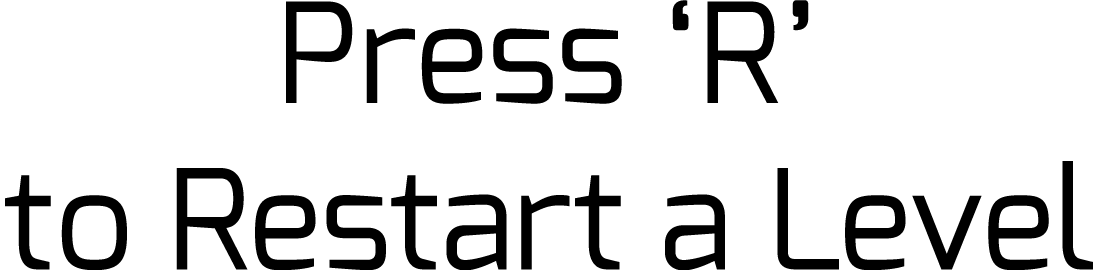
<style>
.page{position:relative;width:1093px;height:270px;background:#ffffff}
.page>*{position:absolute;margin:0}
.t1{font:138.7px "Exo-Regular";color:#000000}
</style>
<div class="page">
<p class="t1" style="left:5px;top:0px;width:1089px;height:271px;text-align:center">Press ‘R’<br>to Restart a Level</p>
</div>
